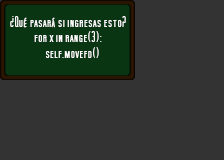
<style>
.page{position:relative;width:224px;height:160px;background:#333333}
.page>*{position:absolute;margin:0}
.t1{font:13.1px "SFMoviePoster";color:#fefefe;scale:0.94 1}
</style>
<div class="page">
<p class="t1" style="left:10px;top:16px;width:116px;height:42px;text-align:center">¿Qué pasará si ingresas esto?<br>for x in range(3):<br>    self.movefd()</p>
</div>
